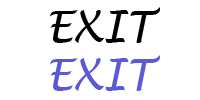
<style>
.page{position:relative;width:200px;height:100px;background:#ffffff}
.page>*{position:absolute;margin:0}
.t1{font:42.7px "LucidaHandwriting-Italic";color:#000000}
.t2{font:42.7px "LucidaHandwriting-Italic";color:#5a5ad6}
</style>
<div class="page">
<p class="t1" style="left:49px;top:7px;width:111px;height:36px">EXIT</p>
<p class="t2" style="left:49px;top:55px;width:111px;height:36px">EXIT</p>
</div>
